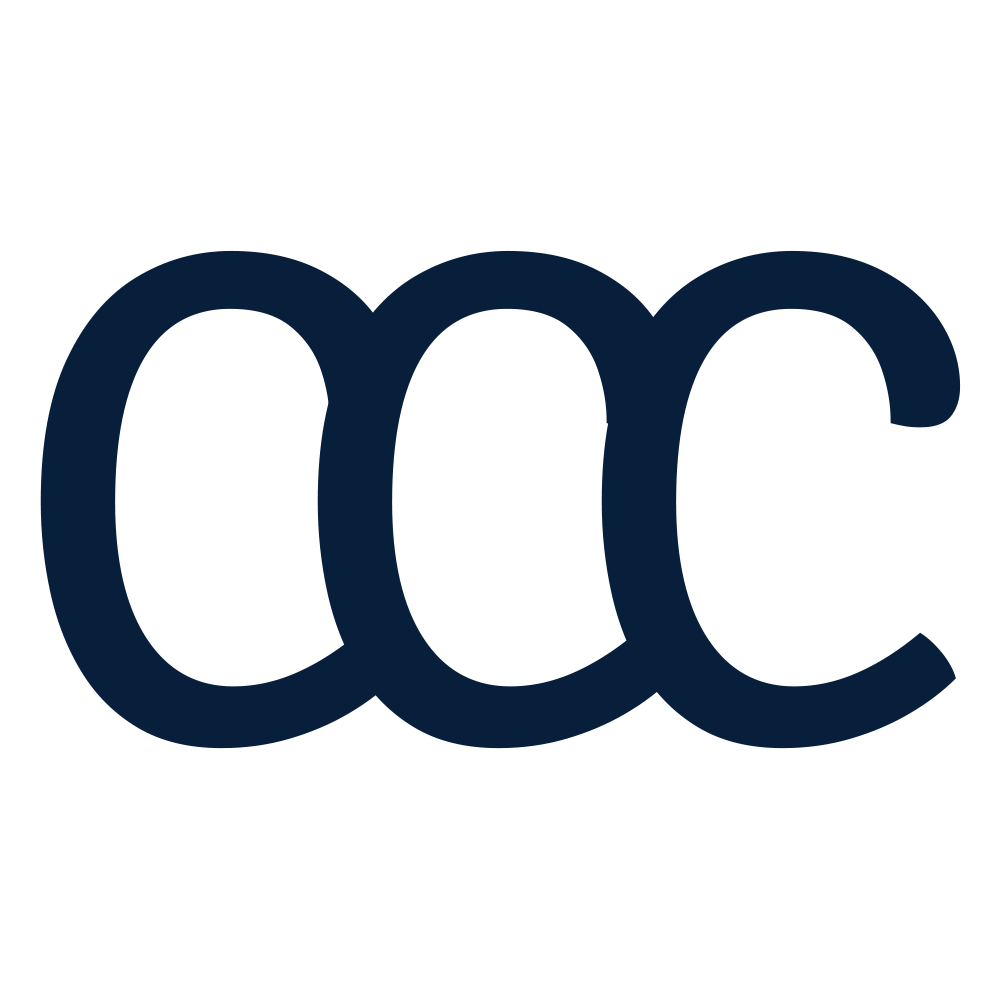
<style>
.page{position:relative;width:1000px;height:1000px;background:#ffffff}
.page>*{position:absolute;margin:0}
.t1{font:701.2px "SignikaNegative-Regular";color:#081f3c}
</style>
<div class="page">
<p class="t1" style="left:40px;top:250px;width:360px;height:499px">C</p>
<p class="t1" style="left:317px;top:250px;width:360px;height:499px">C</p>
<p class="t1" style="left:601px;top:250px;width:360px;height:499px">C</p>
</div>
